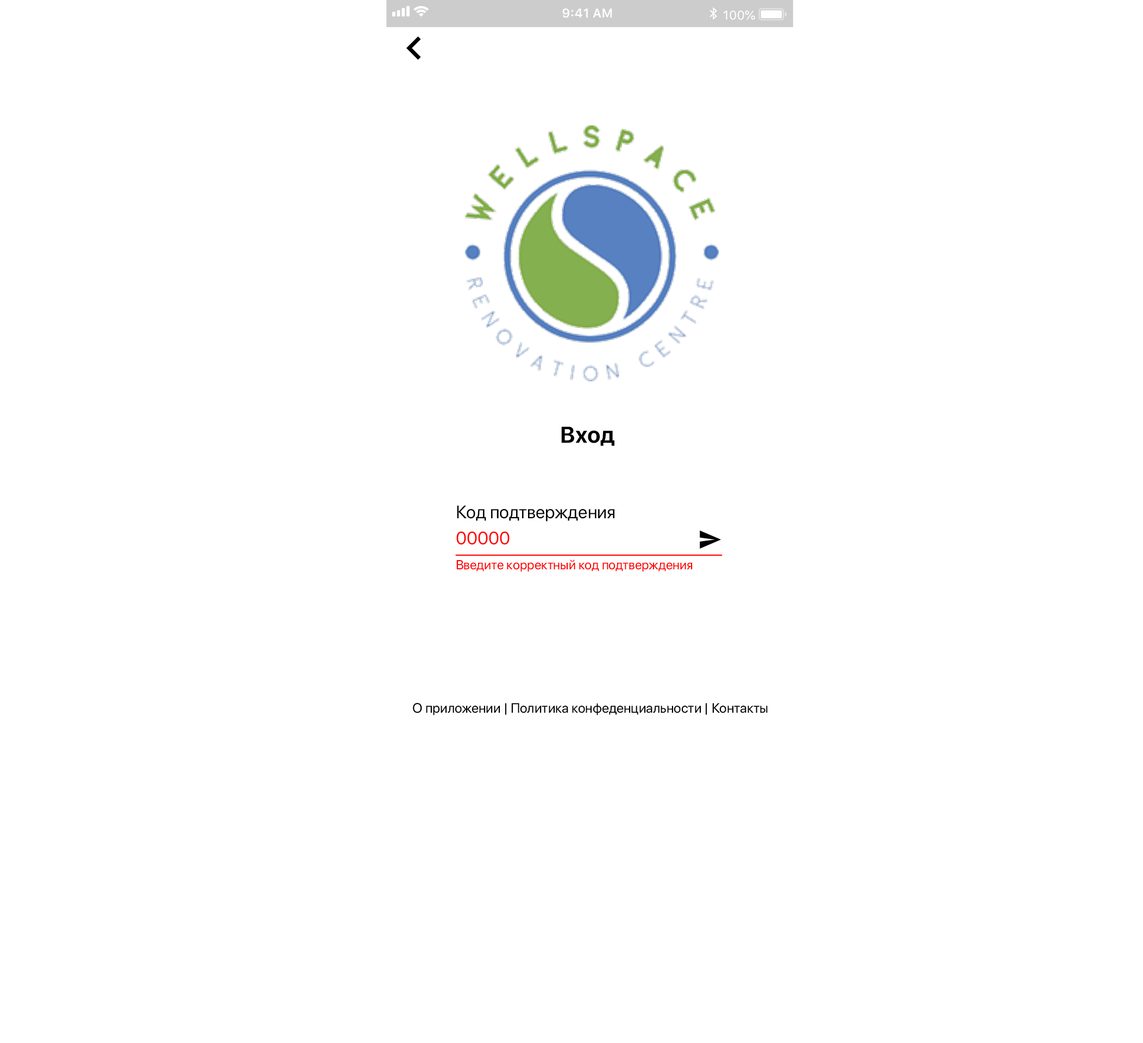
<style>
.page{position:relative;width:1143px;height:1043px;background:#ffffff}
.page>*{position:absolute;margin:0}
.t1{font:22.8px "SFProDisplay-Bold";color:#000000}
.t2{font:17.9px "SFProDisplay-Regular";color:#000000}
.t3{font:17.9px "SFProDisplay-Regular";color:#ff0000}
.t4{font:13px "SFProDisplay-Regular";color:#ff0000}
.t5{font:13.6px "SFProDisplay-Regular";color:#000000}
</style>
<div class="page">
<p class="t1" style="left:561px;top:426px;width:53px;height:20px">Вход</p>
<p class="t2" style="left:457px;top:505px;width:157px;height:17px">Код подтверждения</p>
<p class="t3" style="left:456px;top:531px;width:54px;height:14px">00000</p>
<p class="t4" style="left:456px;top:560px;width:237px;height:12px">Введите корректный код подтверждения</p>
<p class="t5" style="left:413px;top:703px;width:355px;height:13px">О приложении | Политика конфеденциальности | Контакты</p>
</div>
